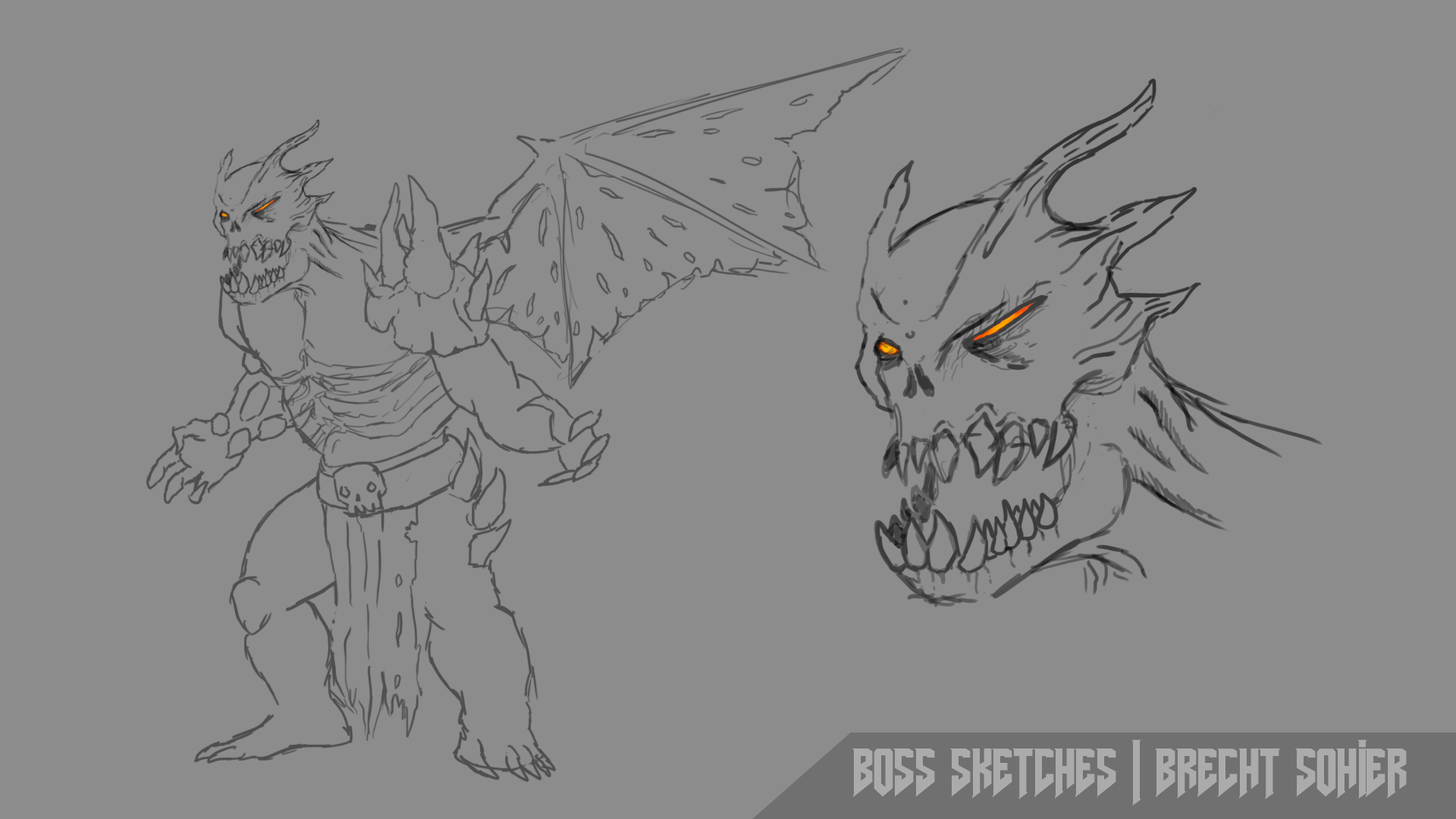
<style>
.page{position:relative;width:1456px;height:819px;background:#8c8c8c}
.page>*{position:absolute;margin:0}
.t1{font:62.2px "AmazDooMLeft";color:#ababab}
</style>
<div class="page">
<p class="t1" style="left:852px;top:739px;width:555px;height:67px">BOSS SKETCHES | BRECHT SOHIER</p>
</div>
